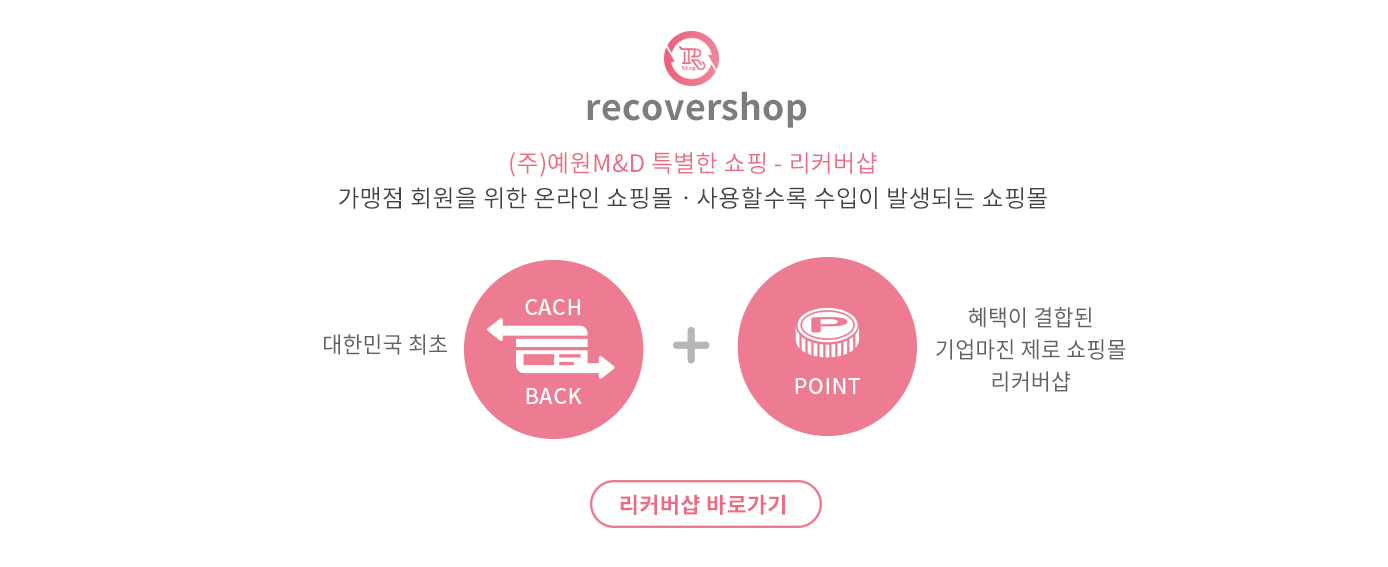
<style>
.page{position:relative;width:1388px;height:567px;background:#ffffff}
.page>*{position:absolute;margin:0}
.t1{font:35.5px "NotoSansCJKkr-Bold";letter-spacing:0.01em;color:#7d7d7d}
.t2{font:24.1px/35.5px "NotoSansCJKkr-Regular";letter-spacing:0.01em;color:#434343}
.t3{font:24.1px/35.5px "NotoSansCJKkr-Regular";letter-spacing:0.01em;color:#ec6a83}
.t4{font:22.8px/31.7px "NotoSansCJKkr-Regular";letter-spacing:0.01em;color:#626262;scale:0.95 1}
.t5{font:22.8px "NotoSansCJKkr-Regular";letter-spacing:0.01em;color:#626262;scale:0.95 1}
.t6{font:22px "NotoSansCJKkr-Bold";letter-spacing:0.01em;color:#ec6a83}
</style>
<div class="page">
<p class="t1" style="left:587px;top:91px;width:220px;height:37px">recovershop</p>
<p class="t2" style="left:339px;top:152px;width:708px;height:57px;text-align:center"><span class="t3">(주)예원M&amp;D 특별한 쇼핑 - 리커버샵 <br></span>가맹점 회원을 위한 온라인 쇼핑몰ㆍ사용할수록 수입이 발생되는 쇼핑몰</p>
<p class="t4" style="left:936px;top:307px;width:190px;height:85px;text-align:center">혜택이 결합된 <br>기업마진 제로 쇼핑몰<br>리커버샵</p>
<p class="t5" style="left:324px;top:334px;width:123px;height:21px">대한민국 최초</p>
<p class="t6" style="left:620px;top:494px;width:165px;height:21px">리커버샵 바로가기</p>
</div>
